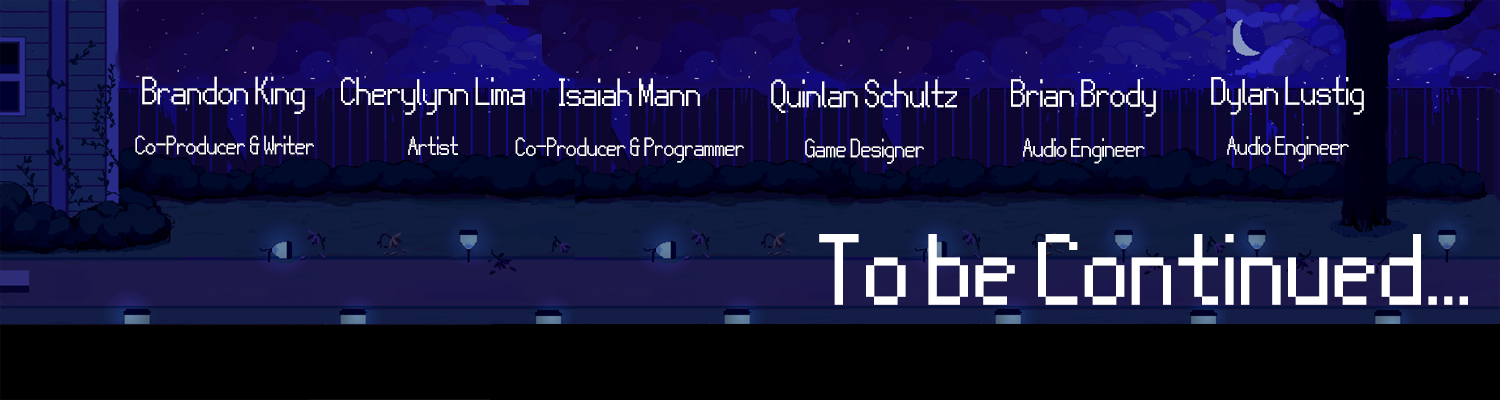
<style>
.page{position:relative;width:1500px;height:400px}
.page>*{position:absolute;margin:0}
.t1{font:41.7px "Balthasar-Titling-NBP";color:#ffffff}
.t2{font:62.5px "Balthasar-Titling-NBP";color:#ffffff}
.t3{font:125px "Balthasar-Regular-NBP";color:#ffffff}
</style>
<div class="page">
<p class="t1" style="left:135px;top:76px;width:179px;height:79px;text-align:center"><span class="t2">Brandon King <br></span>Co-Producer &amp; Writer</p>
<p class="t2" style="left:341px;top:77px;width:184px;height:78px;text-align:center">Cherylynn Lima<br><span class="t1">Artist</span></p>
<p class="t1" style="left:515px;top:78px;width:229px;height:85px;text-align:center"><span class="t2">Isaiah Mann<br></span>Co-Producer &amp; Programmer</p>
<p class="t1" style="left:1211px;top:77px;width:153px;height:85px;text-align:center"><span class="t2">Dylan Lustig<br></span>Audio Engineer</p>
<p class="t2" style="left:771px;top:79px;width:186px;height:85px;text-align:center">Quinlan Schultz<br><span class="t1">Game Designer</span></p>
<p class="t1" style="left:1011px;top:79px;width:145px;height:85px;text-align:center"><span class="t2">Brian Brody<br></span>Audio Engineer</p>
<p class="t3" style="left:819px;top:234px;width:649px;height:71px">To be Continued...</p>
</div>
